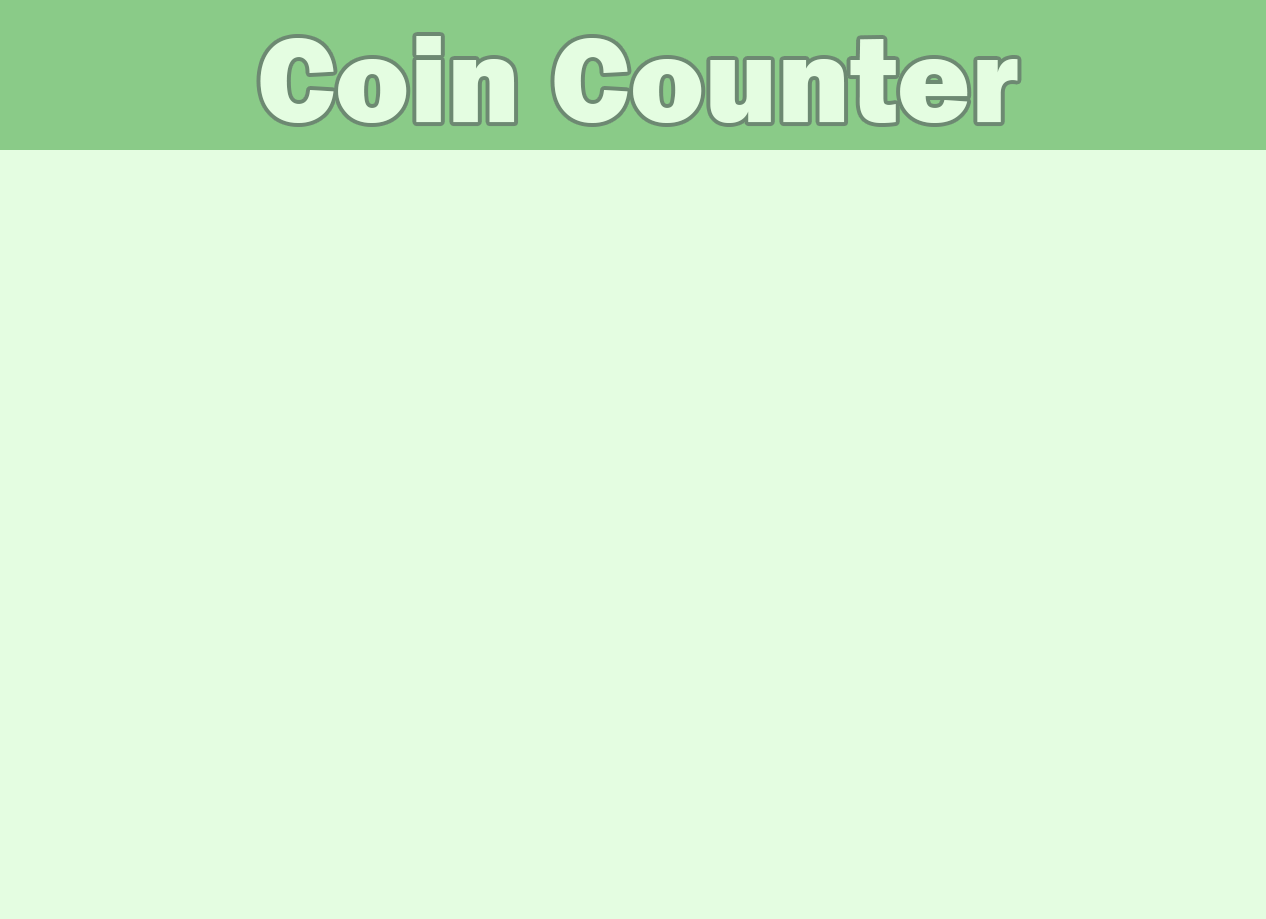
<style>
.page{position:relative;width:1266px;height:919px;background:#e4fde1}
.page>*{position:absolute;margin:0}
.t1{font:125px "FranklinGothic-Heavy";color:#e4fde1}
</style>
<div class="page">
<p class="t1" style="left:260px;top:36px;width:758px;height:87px">Coin Counter</p>
</div>
